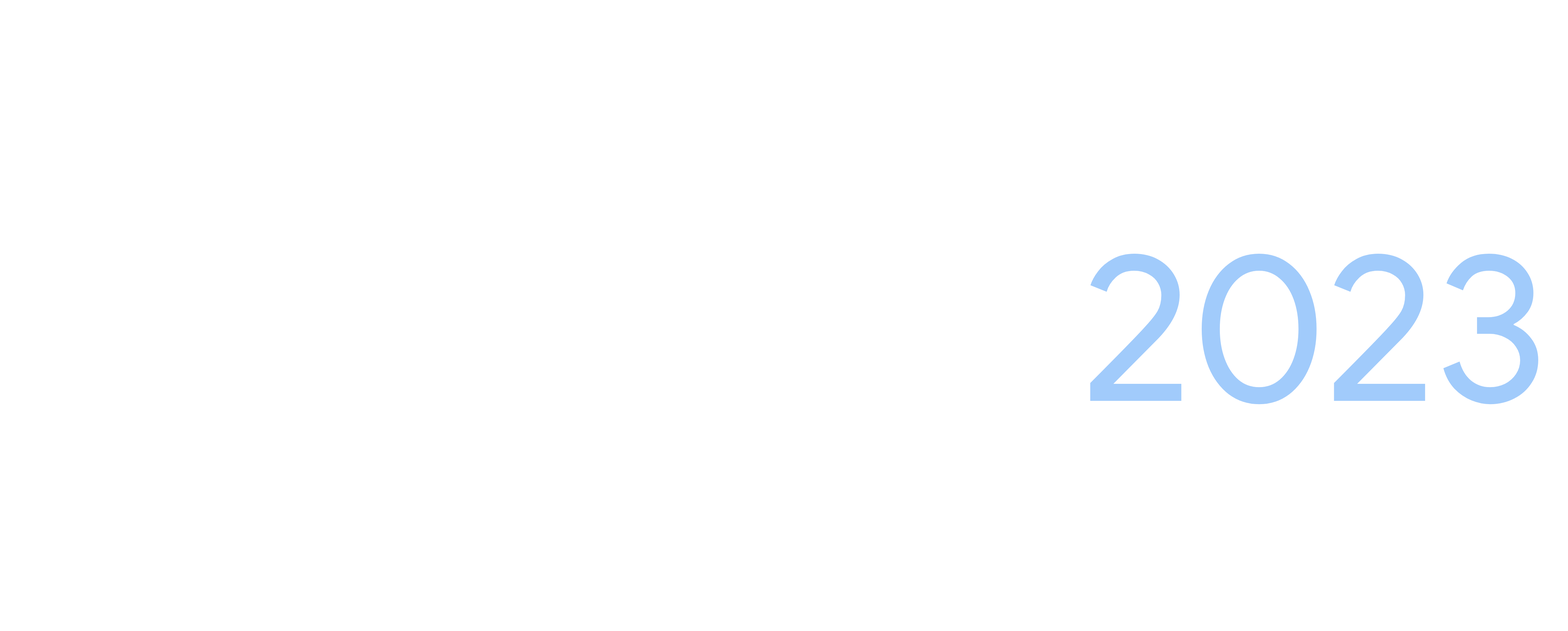
<style>
.page{position:relative;width:1568px;height:631px;background:#ffffff}
.page>*{position:absolute;margin:0}
.t1{font:210.3px "GoogleSansDisplay-Regular";color:#a1cbfb}
</style>
<div class="page">
<p class="t1" style="left:1090px;top:254px;width:448px;height:151px">2023</p>
</div>
